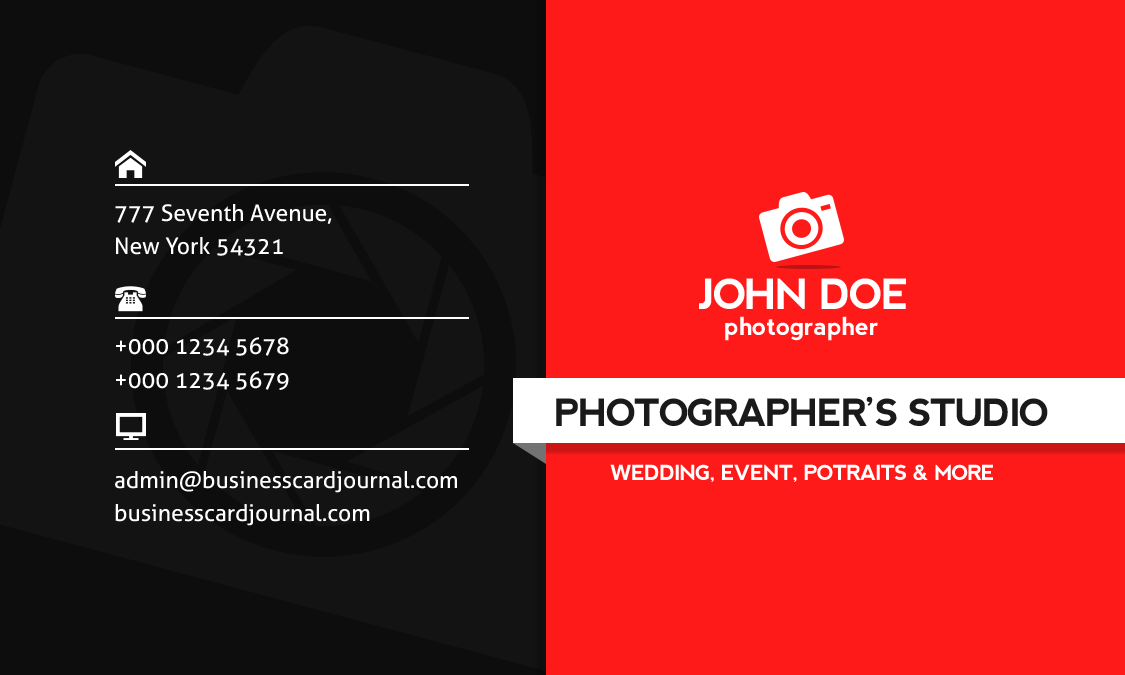
<style>
.page{position:relative;width:1125px;height:675px;background:#ff1a1a}
.page>*{position:absolute;margin:0}
.t1{font:22.9px/33.3px "Aller";color:#ffffff}
.t2{font:41.7px "nevis-Bold";letter-spacing:-0.05em;color:#ffffff;text-transform:uppercase}
.t3{font:25px "nevis-Bold";color:#ffffff}
.t4{font:37.5px "nevis-Bold";letter-spacing:-0.05em;color:#1a1a1a;text-transform:uppercase}
.t5{font:20.8px "nevis-Bold";letter-spacing:-0.05em;color:#ffffff;text-transform:uppercase}
</style>
<div class="page">
<p class="t1" style="left:115px;top:204px;width:342px;height:322px">777 Seventh Avenue,<br>New York 54321<br><br><br>+000 1234 5678<br>+000 1234 5679<br><br><br>admin@businesscardjournal.com<br>businesscardjournal.com</p>
<p class="t2" style="left:699px;top:278px;width:207px;height:31px">John Doe</p>
<p class="t3" style="left:725px;top:316px;width:153px;height:25px">photographer</p>
<p class="t4" style="left:556px;top:396px;width:492px;height:30px">Photographer’s Studio</p>
<p class="t5" style="left:610px;top:464px;width:383px;height:18px">Wedding, Event, Potraits &amp; More</p>
</div>
